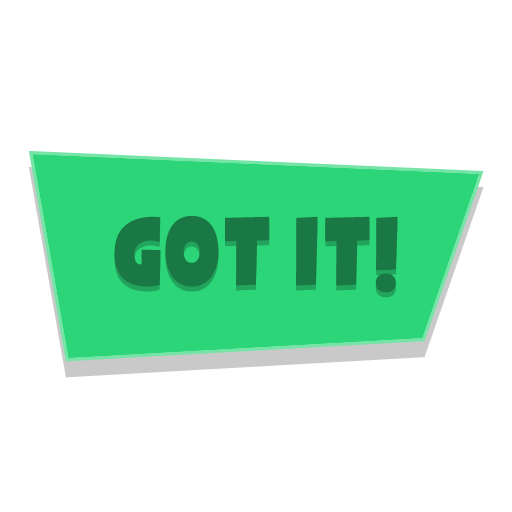
<style>
.page{position:relative;width:512px;height:512px;background:#ffffff}
.page>*{position:absolute;margin:0}
.t1{font:101px "Galpon-Black";color:#197843}
</style>
<div class="page">
<p class="t1" style="left:114px;top:216px;width:284px;height:77px">Got it!</p>
</div>
